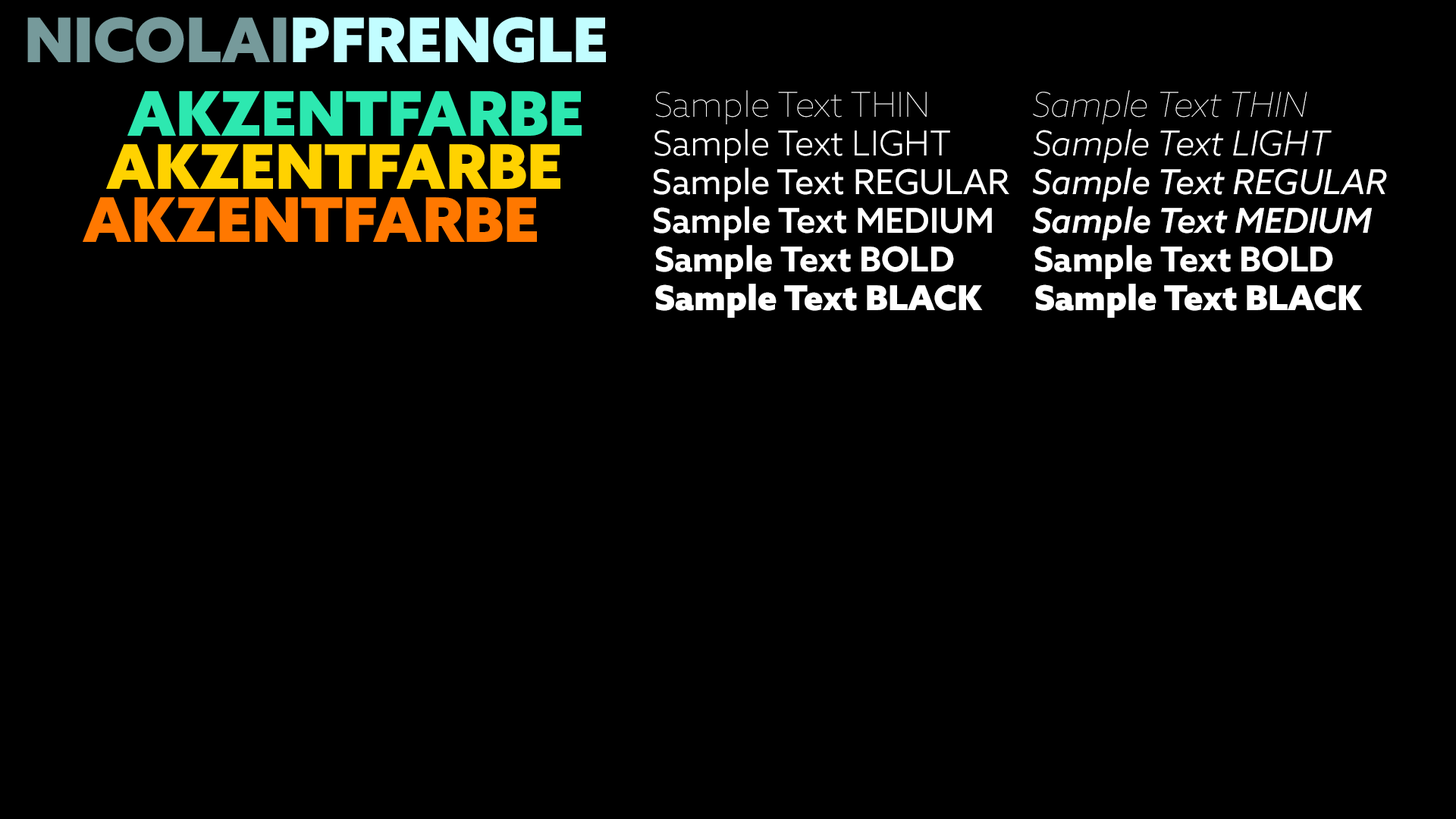
<style>
.page{position:relative;width:1456px;height:819px;background:#000000}
.page>*{position:absolute;margin:0}
.t1{font:61.4px "AzoSans-Black";color:#c2fdff;text-transform:uppercase}
.t2{font:61.4px "AzoSans-Black";color:#769a9b;text-transform:uppercase}
.t3{font:61.4px "AzoSans-Black";color:#2de8b0;text-transform:uppercase}
.t4{font:34.4px "AzoSans-Thin";color:#ffffff}
.t5{font:34.4px "AzoSans-ThinItalic";color:#ffffff}
.t6{font:34.4px "AzoSans-Light";color:#ffffff}
.t7{font:34.4px "AzoSans-LightItalic";color:#ffffff}
.t8{font:61.4px "AzoSans-Black";color:#ffd200;text-transform:uppercase}
.t9{font:34.4px "AzoSans-Regular";color:#ffffff}
.t10{font:34.4px "AzoSans-Italic";color:#ffffff}
.t11{font:61.4px "AzoSans-Black";color:#ff7800;text-transform:uppercase}
.t12{font:34.4px "AzoSans-Medium";color:#ffffff}
.t13{font:34.4px "AzoSans-MediumItalic";color:#ffffff}
.t14{font:34.4px "AzoSans-Bold";color:#ffffff}
.t15{font:34.4px "AzoSans-Black";color:#ffffff}
</style>
<div class="page">
<p class="t1" style="left:27px;top:17px;width:579px;height:46px"><span class="t2">Nicolai</span>Pfrengle</p>
<p class="t3" style="left:127px;top:91px;width:455px;height:45px">Akzentfarbe</p>
<p class="t4" style="left:656px;top:90px;width:271px;height:34px">Sample Text THIN</p>
<p class="t5" style="left:1033px;top:90px;width:274px;height:34px">Sample Text THIN</p>
<p class="t6" style="left:654px;top:129px;width:296px;height:34px">Sample Text LIGHT</p>
<p class="t7" style="left:1034px;top:129px;width:298px;height:34px">Sample Text LIGHT</p>
<p class="t8" style="left:106px;top:144px;width:454px;height:45px">Akzentfarbe</p>
<p class="t9" style="left:654px;top:168px;width:355px;height:34px">Sample Text REGULAR</p>
<p class="t10" style="left:1033px;top:168px;width:354px;height:34px">Sample Text REGULAR</p>
<p class="t11" style="left:83px;top:197px;width:454px;height:45px">Akzentfarbe</p>
<p class="t12" style="left:654px;top:206px;width:338px;height:34px">Sample Text MEDIUM</p>
<p class="t13" style="left:1033px;top:206px;width:339px;height:34px">Sample Text MEDIUM</p>
<p class="t14" style="left:655px;top:245px;width:299px;height:34px">Sample Text BOLD</p>
<p class="t14" style="left:1034px;top:245px;width:299px;height:34px">Sample Text BOLD</p>
<p class="t15" style="left:655px;top:284px;width:328px;height:34px">Sample Text BLACK</p>
<p class="t15" style="left:1035px;top:284px;width:328px;height:34px">Sample Text BLACK</p>
</div>
